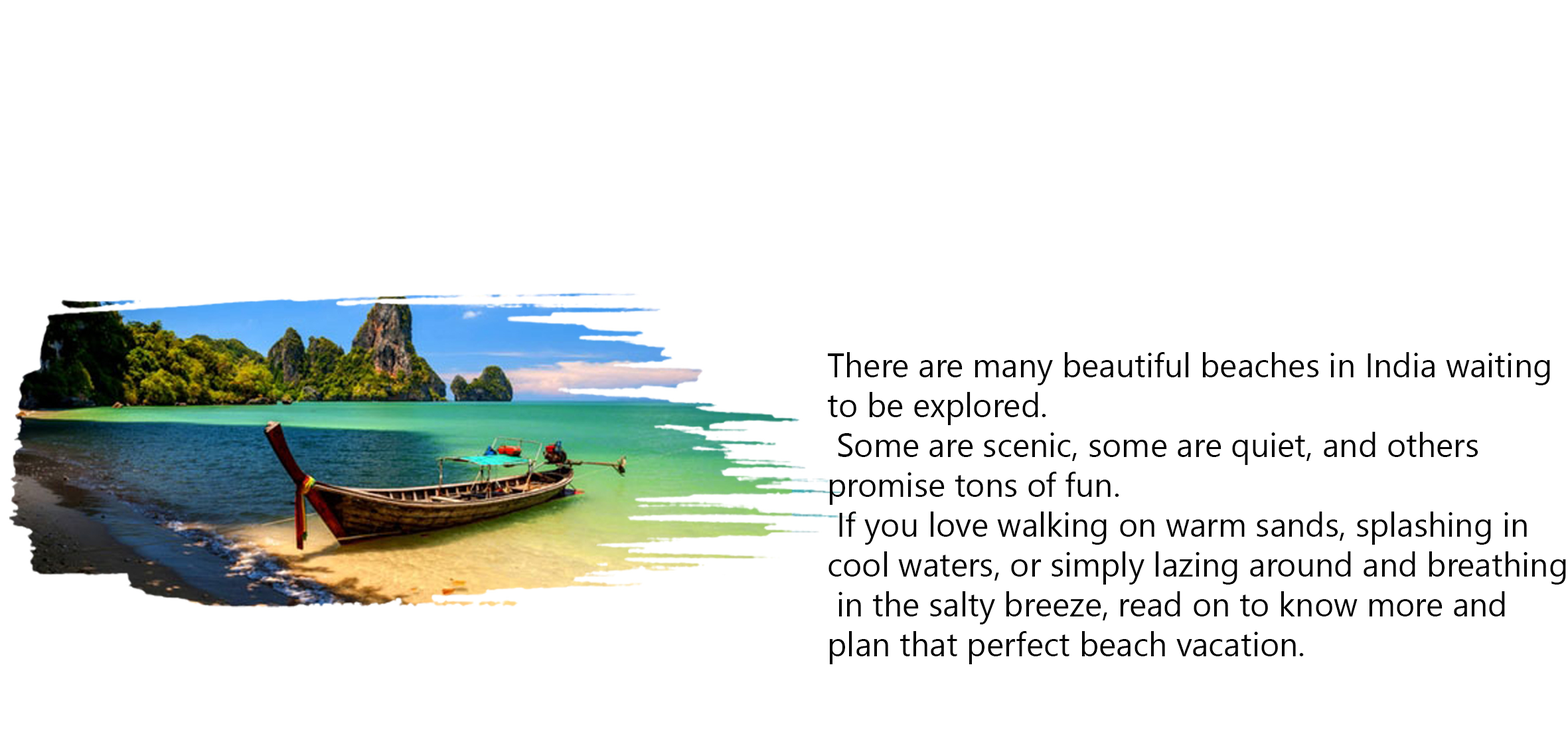
<style>
.page{position:relative;width:1568px;height:742px;background:#ffffff}
.page>*{position:absolute;margin:0}
.t1{font:33.2px "SegoeUIHistoric";color:#000000}
</style>
<div class="page">
<p class="t1" style="left:828px;top:352px;width:738px;height:312px">There are many beautiful beaches in India waiting <br>to be explored.<br> Some are scenic, some are quiet, and others <br>promise tons of fun.<br> If you love walking on warm sands, splashing in <br>cool waters, or simply lazing around and breathing<br> in the salty breeze, read on to know more and <br>plan that perfect beach vacation.</p>
</div>
